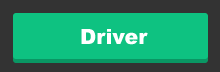
<style>
.page{position:relative;width:220px;height:72px;background:#0ec281}
.page>*{position:absolute;margin:0}
.t1{font:21px "Arial-Black";color:#ffffff}
</style>
<div class="page">
<p class="t1" style="left:81px;top:29px;width:67px;height:16px">Driver</p>
</div>
